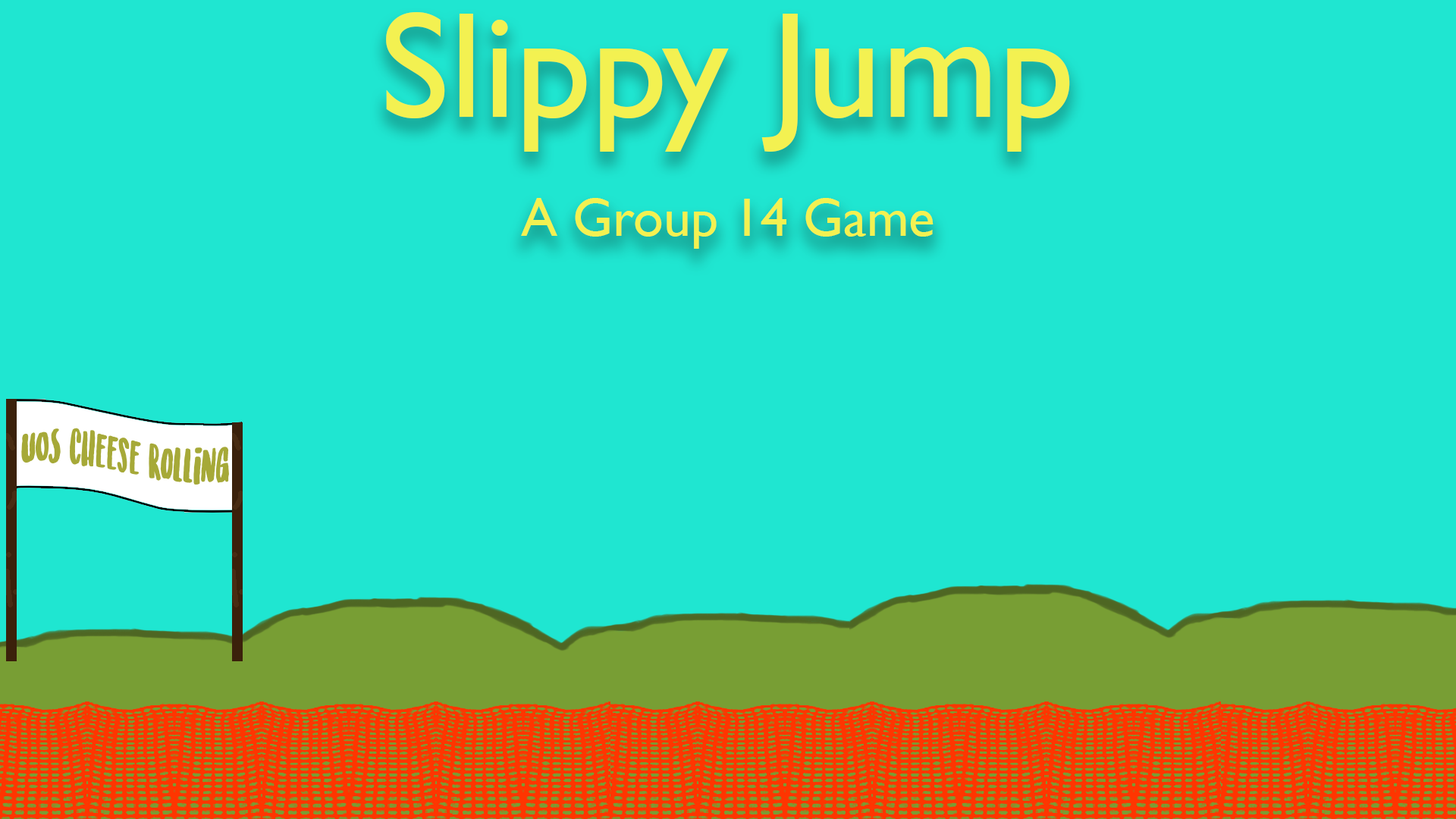
<style>
.page{position:relative;width:1456px;height:819px;background:#1fe6d1}
.page>*{position:absolute;margin:0}
.t1{font:151.7px "GillSansMT";color:#f3f151}
.t2{font:54.6px "GillSansMT";color:#f3f151}
</style>
<div class="page">
<p class="t1" style="left:386px;top:12px;width:684px;height:140px">Slippy Jump</p>
<p class="t2" style="left:521px;top:198px;width:412px;height:51px">A Group 14 Game</p>
</div>
